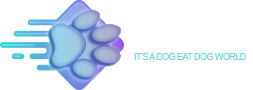
<style>
.page{position:relative;width:253px;height:90px;background:#ffffff}
.page>*{position:absolute;margin:0}
.t1{font:9px "ArialMT";letter-spacing:-0.06em;color:#6dd7e2}
</style>
<div class="page">
<p class="t1" style="left:134px;top:53px;width:112px;height:7px">IT’S A DOG EAT DOG WORLD</p>
</div>
